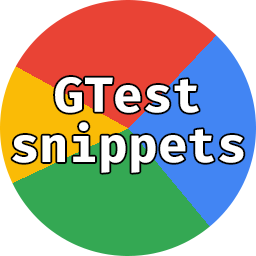
<style>
.page{position:relative;width:256px;height:256px;background:#ffffff}
.page>*{position:absolute;margin:0}
.t1{font:48px/50px "FiraCode-Bold";color:#ffffff}
</style>
<div class="page">
<p class="t1" style="left:12px;top:77px;width:232px;height:96px;text-align:center">GTest<br>snippets</p>
</div>
